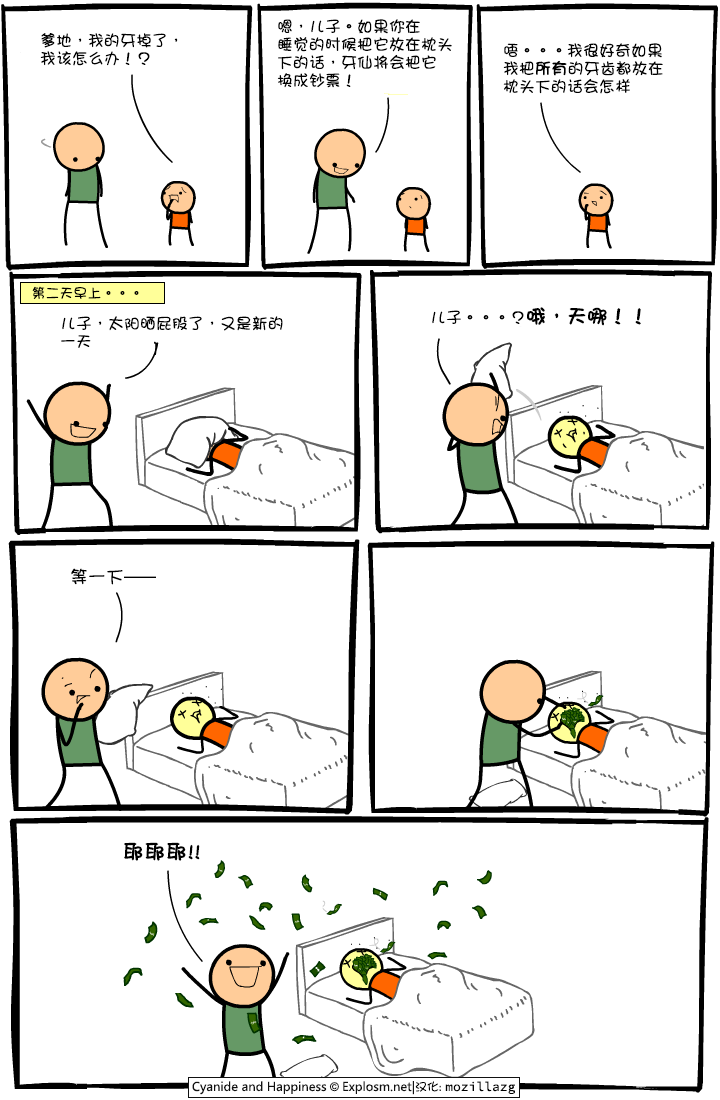
<style>
.page{position:relative;width:720px;height:1100px;background:#ffffff}
.page>*{position:absolute;margin:0}
.t1{font:16px/18px "DFGirl";color:#000000}
.t2{font:16px/18px "DFGirl";color:#000000;font-weight:bold}
.t3{font:14px "DFGirl";color:#000000}
.t4{font:16px "DFGirl";color:#000000}
.t5{font:20px "DFGirl";color:#000000;font-weight:bold}
.t6{font:18px "DFGirl";color:#000000}
.t7{font:21px "DFGirl";color:#000000;font-weight:bold}
</style>
<div class="page">
<p class="t1" style="left:277px;top:19px;width:175px;height:69px">嗯，儿子。如果你在<br>睡觉的时候把它放在枕头<br>下的话，牙仙将会把它<br>换成钞票！</p>
<p class="t1" style="left:40px;top:33px;width:138px;height:33px">爹地，我的牙掉了，<br>我该怎么办！？</p>
<p class="t1" style="left:503px;top:43px;width:160px;height:51px">唔。。。我很好奇如果<br>我把<span class="t2">所有</span>的牙齿都放在<br>枕头下的话会怎样</p>
<p class="t3" style="left:32px;top:286px;width:107px;height:13px">第二天早上。。。</p>
<p class="t1" style="left:61px;top:316px;width:222px;height:32px">儿子，太阳晒屁股了，又是新的<br>一天</p>
<p class="t4" style="left:432px;top:307px;width:209px;height:19px">儿子。。。？<span class="t5">哦，天哪！！</span></p>
<p class="t6" style="left:71px;top:568px;width:85px;height:17px">等一下<span class="t4">——</span></p>
<p class="t7" style="left:124px;top:842px;width:76px;height:19px">耶耶耶!!</p>
</div>
